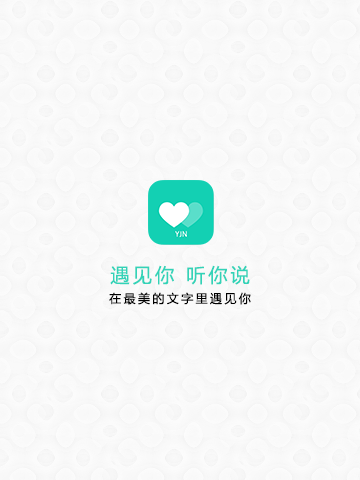
<style>
.page{position:relative;width:360px;height:480px;background:#f9f9f9}
.page>*{position:absolute;margin:0}
.t1{font:19.2px "MicrosoftYaHei";letter-spacing:0.16em;color:#32d3b8}
.t2{font:12px "MicrosoftYaHei";letter-spacing:0.2em;color:#000000}
</style>
<div class="page">
<p class="t1" style="left:110px;top:265px;width:140px;height:20px">遇见你 听你说</p>
<p class="t2" style="left:109px;top:292px;width:142px;height:13px">在最美的文字里遇见你</p>
</div>
